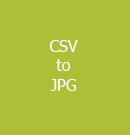
<style>
.page{position:relative;width:130px;height:135px;background:#aebe36}
.page>*{position:absolute;margin:0}
.t1{font:12px "Tahoma";color:#fcfcfa}
</style>
<div class="page">
<p class="t1" style="left:49px;top:40px;width:29px;height:51px;text-align:center">CSV<br>to<br>JPG</p>
</div>
